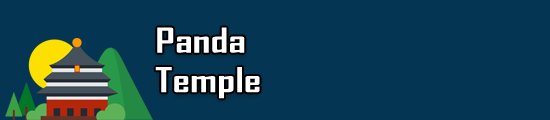
<style>
.page{position:relative;width:550px;height:120px;background:#043654}
.page>*{position:absolute;margin:0}
.t1{font:32.9px "AgencyFB-Bold";color:#ffffff;scale:1.33 1}
</style>
<div class="page">
<p class="t1" style="left:155px;top:27px;width:105px;height:72px">Panda <br>Temple</p>
</div>
